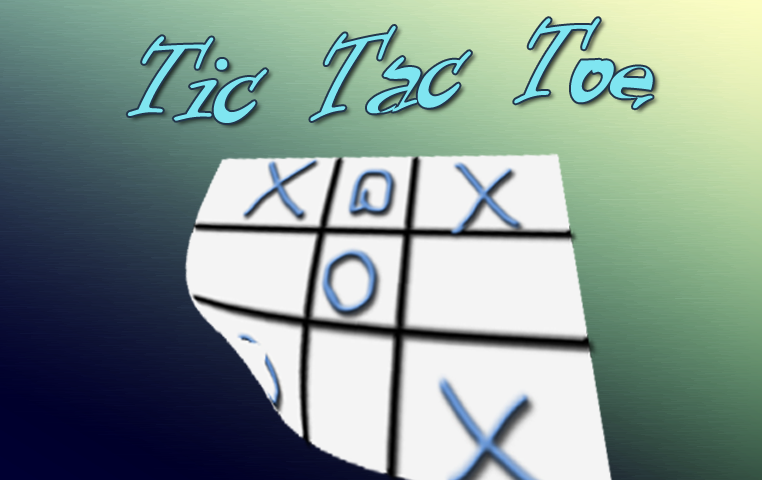
<style>
.page{position:relative;width:762px;height:480px}
.page>*{position:absolute;margin:0}
.t1{font:127.7px "InformalRoman-Regular";color:#7fe5f1}
</style>
<div class="page">
<p class="t1" style="left:127px;top:18px;width:526px;height:105px">Tic Tac Toe</p>
</div>
